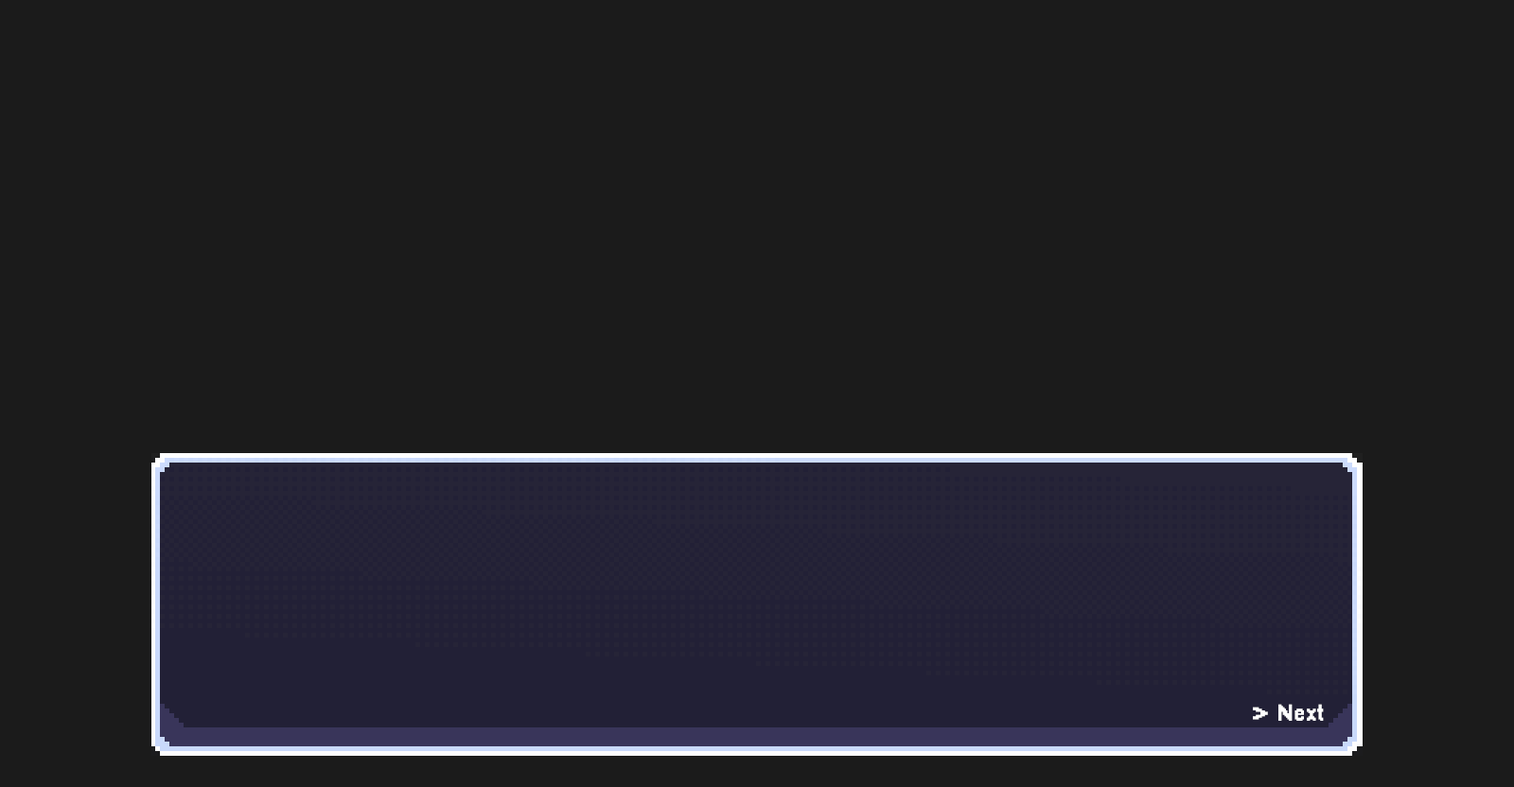
<style>
.page{position:relative;width:1514px;height:787px;background:#1b1b1b}
.page>*{position:absolute;margin:0}
.t1{font:23.9px "Pixellari";color:#ffffff}
</style>
<div class="page">
<p class="t1" style="left:1253px;top:704px;width:71px;height:17px">&gt; Next</p>
</div>
